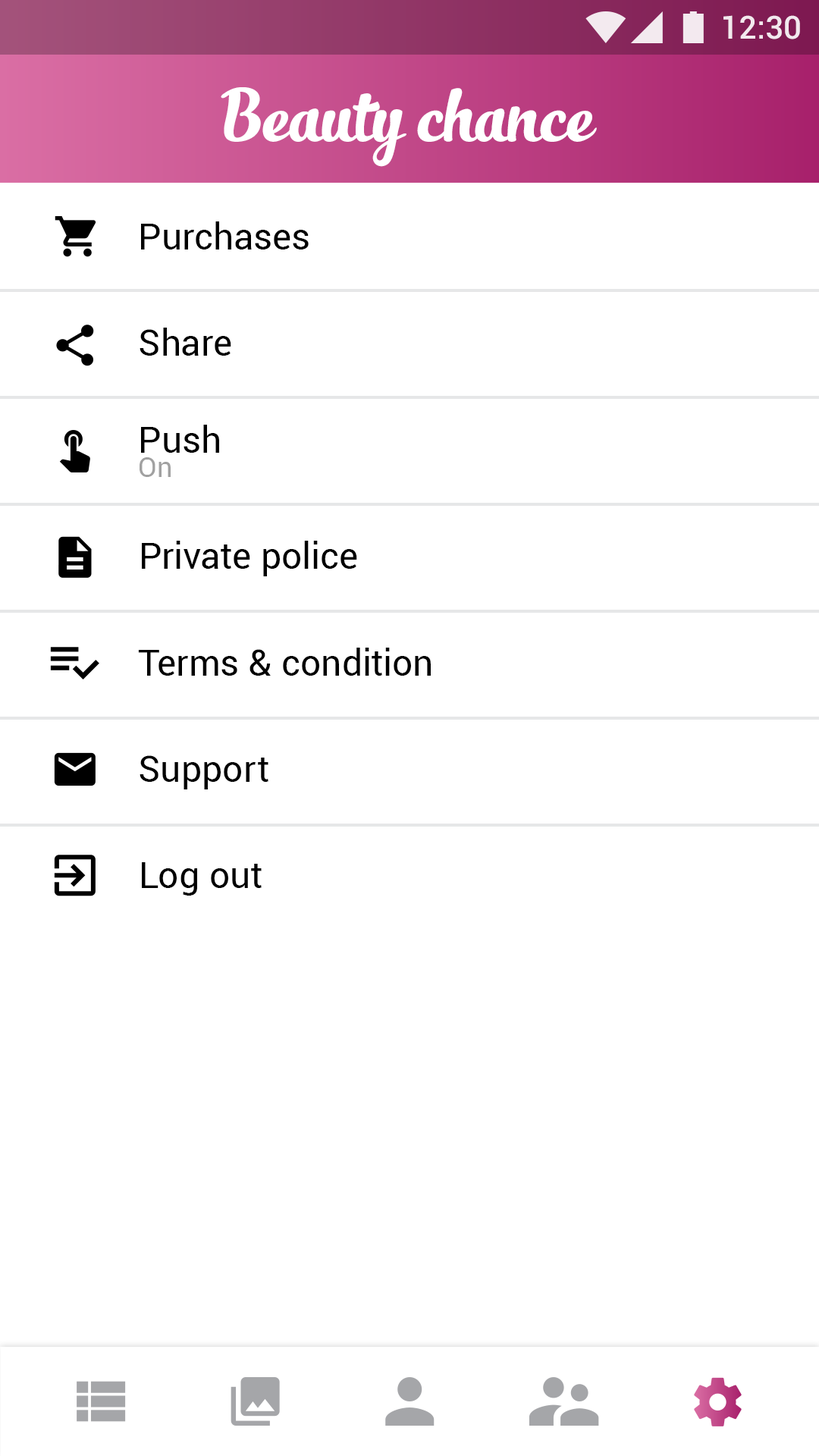
<style>
.page{position:relative;width:819px;height:1456px;background:#ffffff}
.page>*{position:absolute;margin:0}
.t1{font:31.8px "Roboto-Medium";color:#ffffff}
.t2{font:54.6px "SlimTony-Italic";color:#ffffff}
.t3{font:36.4px "Roboto-Regular";letter-spacing:0.01em;color:#000000}
.t4{font:27.3px "Roboto-Regular";letter-spacing:0.01em;color:#a1a1a1}
</style>
<div class="page">
<p class="t1" style="left:723px;top:15px;width:77px;height:24px">12:30</p>
<p class="t2" style="left:221px;top:87px;width:376px;height:80px">Beauty chance</p>
<p class="t3" style="left:141px;top:221px;width:168px;height:28px">Purchases</p>
<p class="t3" style="left:140px;top:328px;width:91px;height:28px">Share</p>
<p class="t3" style="left:141px;top:425px;width:78px;height:28px">Push</p>
<p class="t4" style="left:140px;top:457px;width:31px;height:20px">On</p>
<p class="t3" style="left:142px;top:541px;width:215px;height:35px">Private police</p>
<p class="t3" style="left:138px;top:648px;width:293px;height:28px">Terms &amp; condition</p>
<p class="t3" style="left:140px;top:755px;width:128px;height:34px">Support</p>
<p class="t3" style="left:142px;top:862px;width:120px;height:34px">Log out</p>
</div>
